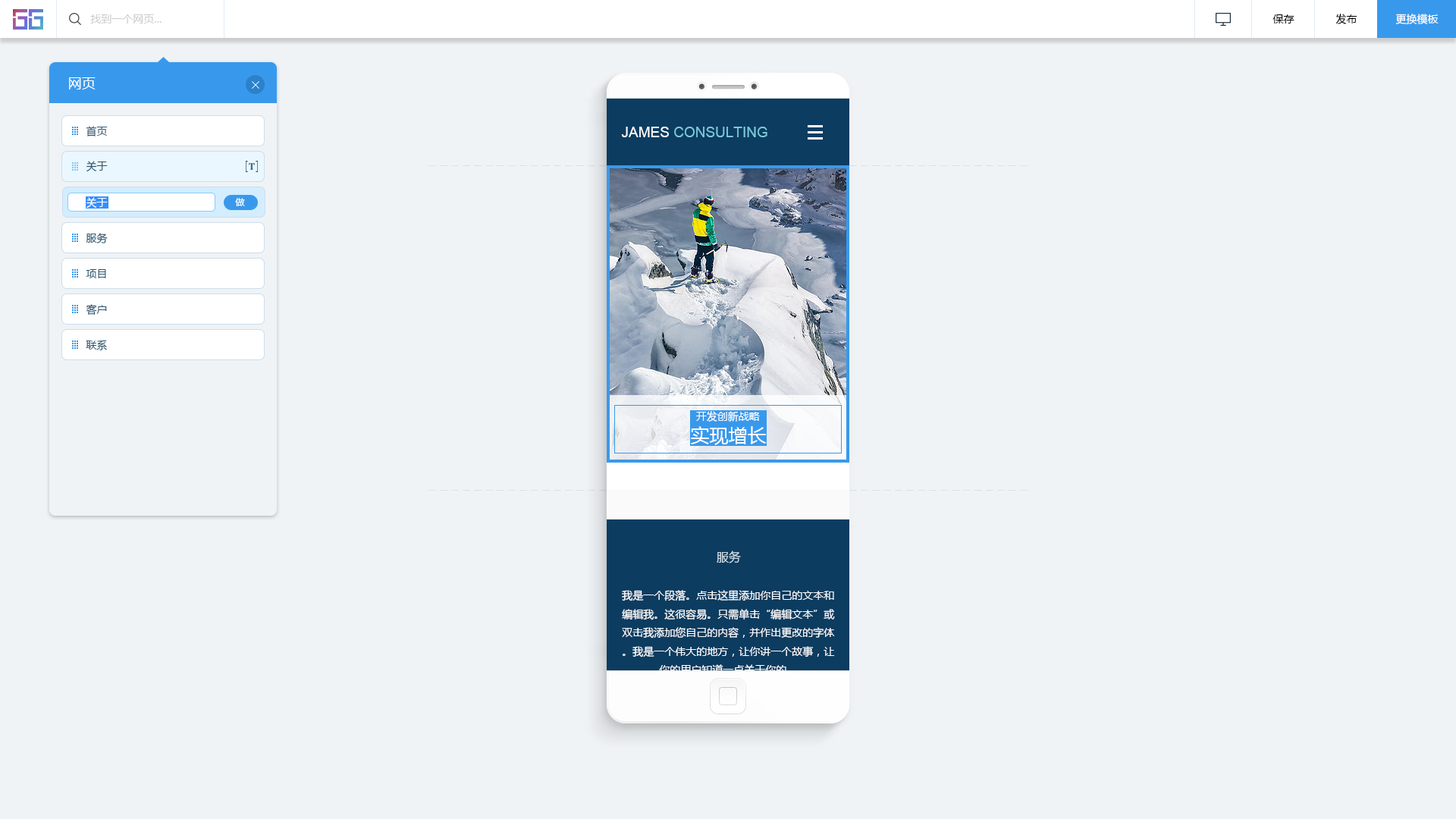
<style>
.page{position:relative;width:1456px;height:819px;background:#f0f3f5}
.page>*{position:absolute;margin:0}
.t1{font:10.6px "MicrosoftYaHei";color:#cccccc}
.t2{font:10.6px "MicrosoftYaHei";color:#000000}
.t3{font:10.6px "MicrosoftYaHei";color:#ffffff}
.t4{font:13.6px "MicrosoftYaHei";color:#ffffff}
.t5{font:10.6px "MicrosoftYaHei";color:#2b5672}
.t6{font:14.4px "ArialMT";color:#79cada}
.t7{font:14.4px "ArialMT";color:#ffffff}
.t8{font:9.1px "MicrosoftYaHei";color:#ffffff}
.t9{font:19px "MicrosoftYaHei";color:#ffffff}
.t10{font:12.1px "MicrosoftYaHei";color:#d1e0eb}
</style>
<div class="page">
<p class="t1" style="left:90px;top:14px;width:72px;height:10px">找到一个网页...</p>
<p class="t2" style="left:1272px;top:14px;width:22px;height:10px">保存</p>
<p class="t2" style="left:1335px;top:14px;width:22px;height:10px">发布</p>
<p class="t3" style="left:1395px;top:14px;width:44px;height:10px">更换模板</p>
<p class="t4" style="left:69px;top:77px;width:27px;height:12px">网页</p>
<p class="t5" style="left:86px;top:126px;width:22px;height:10px">首页</p>
<p class="t6" style="left:621px;top:127px;width:146px;height:10px"><span class="t7">JAMES </span>CONSULTING</p>
<p class="t5" style="left:86px;top:161px;width:22px;height:10px">关于</p>
<p class="t3" style="left:86px;top:197px;width:22px;height:11px">关于</p>
<p class="t8" style="left:235px;top:198px;width:10px;height:8px">做</p>
<p class="t5" style="left:86px;top:233px;width:22px;height:10px">服务</p>
<p class="t5" style="left:86px;top:269px;width:20px;height:9px">项目</p>
<p class="t5" style="left:86px;top:304px;width:21px;height:11px">客户</p>
<p class="t5" style="left:86px;top:340px;width:21px;height:10px">联系</p>
<p class="t3" style="left:695px;top:411px;width:65px;height:11px">开发创新战略</p>
<p class="t9" style="left:691px;top:426px;width:76px;height:19px">实现增长</p>
<p class="t10" style="left:717px;top:551px;width:24px;height:12px">服务</p>
<p class="t3" style="left:622px;top:590px;width:213px;height:85px;text-align:center">我是一个段落。点击这里添加你自己的文本和编辑我。这很容易。只需单击“编辑文本”或双击我添加您自己的内容，并作出更改的字体。我是一个伟大的地方，让你讲一个故事，让你的用户知道一点关于你的。</p>
</div>
